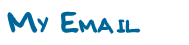
<style>
.page{position:relative;width:189px;height:45px;background:#ffffff}
.page>*{position:absolute;margin:0}
.t1{font:18px "BobbiesHand";color:#006699}
.t2{font:30px "BobbiesHand";color:#006699}
</style>
<div class="page">
<p class="t1" style="left:8px;top:12px;width:132px;height:21px"><span class="t2">M</span>Y <span class="t2">E</span>MAIL</p>
</div>
